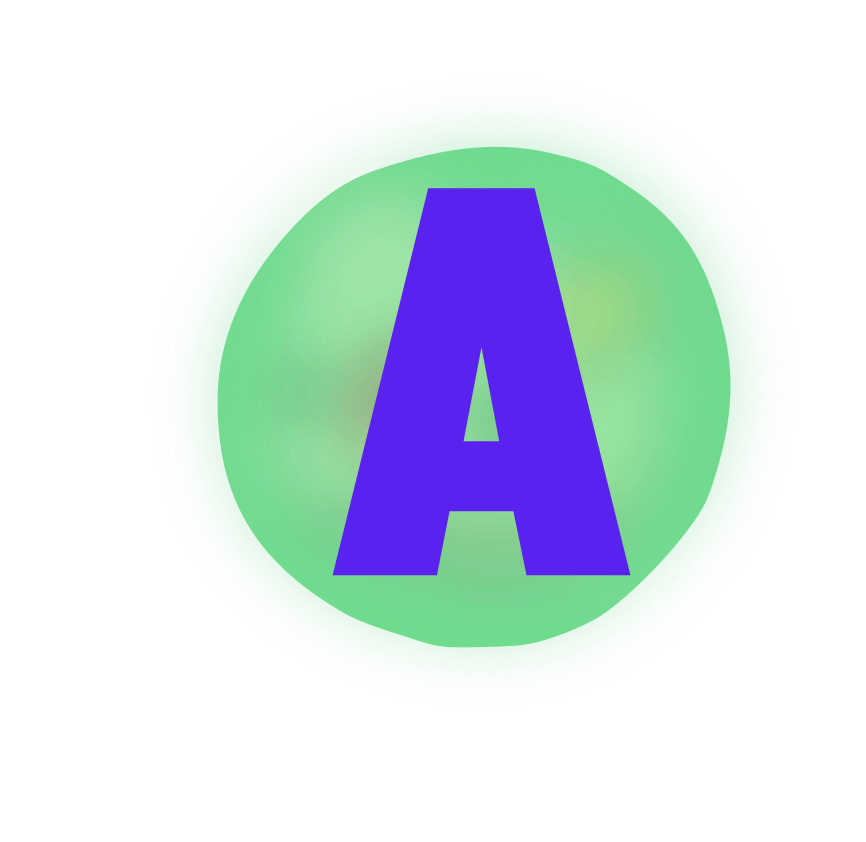
<style>
.page{position:relative;width:866px;height:842px;background:#ffffff}
.page>*{position:absolute;margin:0}
.t1{font:429.2px "FjallaOne";color:#5922ee;scale:1.34 1}
</style>
<div class="page">
<p class="t1" style="left:332px;top:188px;width:299px;height:388px">A</p>
</div>
